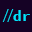
<style>
.page{position:relative;width:32px;height:32px;background:#150225}
.page>*{position:absolute;margin:0}
.t1{font:15.3px "SourceCodePro-Light";letter-spacing:-0.3em;color:#00e4fe}
.t2{font:15.3px "SourceCodePro-Bold";color:#00e4fe}
</style>
<div class="page">
<p class="t1" style="left:2px;top:9px;width:12px;height:13px">//</p>
<p class="t2" style="left:13px;top:10px;width:17px;height:11px">dr</p>
</div>
